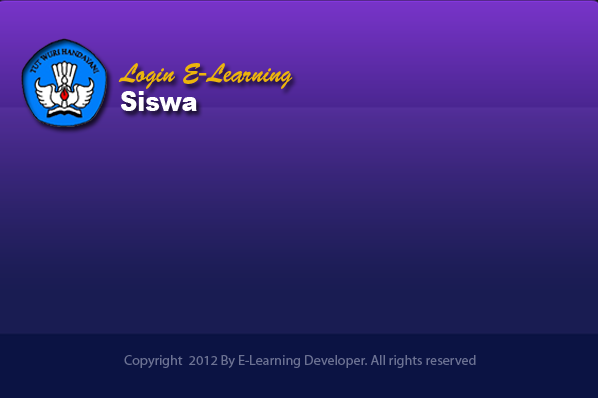
<style>
.page{position:relative;width:598px;height:398px}
.page>*{position:absolute;margin:0}
.t1{font:27.2px "BrushScriptStd";color:#ecb50c;scale:0.88 1}
.t2{font:27.2px "Arial-Black";color:#ffffff;scale:0.88 1}
.t3{font:13.7px "MyriadPro-Regular";color:#6c7293}
</style>
<div class="page">
<p class="t1" style="left:118px;top:63px;width:175px;height:26px">Login E-Learning</p>
<p class="t2" style="left:120px;top:91px;width:77px;height:20px">Siswa</p>
<p class="t3" style="left:124px;top:355px;width:352px;height:13px">Copyright  2012 By E-Learning Developer. All rights reserved</p>
</div>
